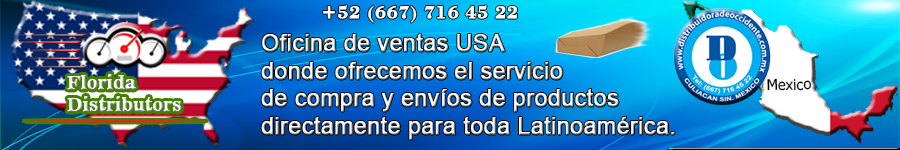
<style>
.page{position:relative;width:900px;height:150px}
.page>*{position:absolute;margin:0}
.t1{font:18.8px "BodoniBT-Bold";color:#ffffff;font-weight:bold}
.t2{font:22.9px "ArialMT";color:#ffffff;font-weight:bold}
.t3{font:18.3px "News706BT-BoldC";color:#ffffff;font-weight:bold}
.t4{font:7.1px "Tahoma";color:#000000}
</style>
<div class="page">
<p class="t1" style="left:323px;top:5px;width:194px;height:18px">+52 (667) 716 45 22</p>
<p class="t2" style="left:261px;top:34px;width:414px;height:106px">Oficina de ventas USA <br>donde ofrecemos el servicio <br>de compra y envíos de productos <br>directamente para toda Latinoamérica.</p>
<p class="t3" style="left:67px;top:74px;width:115px;height:38px">Florida<br>Distributors</p>
<p class="t4" style="left:767px;top:78px;width:45px;height:13px;rotate:-1deg">Mexico</p>
</div>
